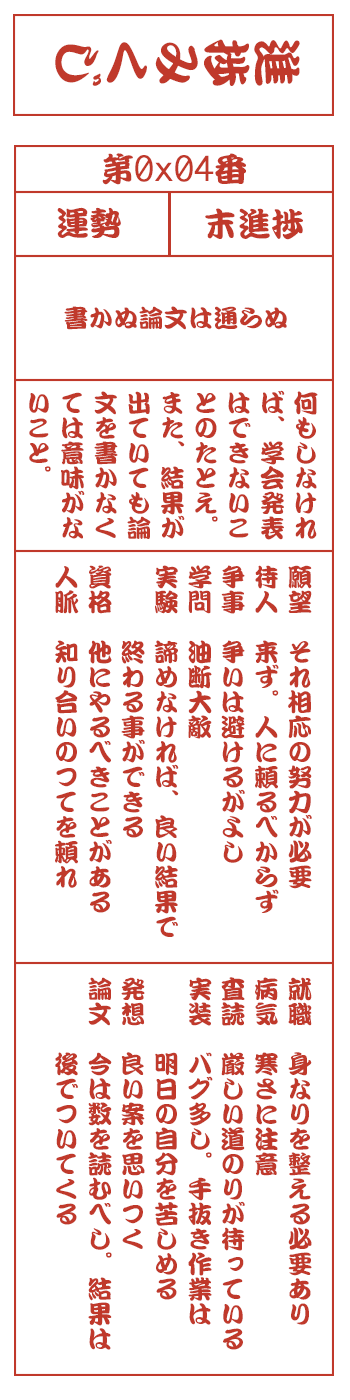
<style>
.page{position:relative;width:350px;height:1400px;background:#ffffff}
.page>*{position:absolute;margin:0}
.t1{font:50px "DFKanTeiRyu-XB-MP-RKSJ-H";color:#c0392b}
.t2{font:33.3px "Monaco";color:#c0392b}
.t3{font:33.3px "DFKanTeiRyu-XB-MP-RKSJ-H";color:#c0392b}
.t4{font:25px "DFKanTeiRyu-XB-MP-RKSJ-H";color:#c0392b}
.t5{font:25px/33.3px "DFKanTeiRyu-XB-MP-RKSJ-H";color:#c0392b}
</style>
<div class="page">
<p class="t1" style="left:55px;top:39px;width:245px;height:47px;rotate:90deg">進捗みくじ</p>
<p class="t2" style="left:102px;top:153px;width:144px;height:32px"><span class="t3">第</span>0x04<span class="t3">番</span></p>
<p class="t3" style="left:57px;top:207px;width:64px;height:31px">運勢</p>
<p class="t3" style="left:205px;top:208px;width:98px;height:32px">末進捗</p>
<p class="t4" style="left:64px;top:306px;width:223px;height:24px">書かぬ論文は通らぬ</p>
<p class="t5" style="left:29px;top:390px;width:289px;height:150px">何もしなけれ<br>ば、学会発表<br>はできないこ<br>とのたとえ。<br>また、結果が<br>出ていても論<br>文を書かなく<br>ては意味がな<br>いこと。</p>
<p class="t5" style="left:55px;top:565px;width:257px;height:372px">願望　それ相応の努力が必要<br>待人　来ず。人に頼るべからず<br>争事　争いは避けるがよし<br>学問　油断大敵<br>実験　諦めなければ、良い結果で<br>　　　終わる事ができる<br>資格　他にやるべきことがある<br>人脈　知り合いのつてを頼れ</p>
<p class="t5" style="left:55px;top:977px;width:257px;height:373px">就職　身なりを整える必要あり<br>病気　寒さに注意<br>査読　厳しい道のりが待っている<br>実装　バグ多し。手抜き作業は<br>　　　明日の自分を苦しめる<br>発想　良い案を思いつく<br>論文　今は数を読むべし。結果は<br>　　　後でついてくる</p>
</div>
